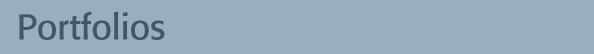
<style>
.page{position:relative;width:594px;height:54px;background:#99afbf}
.page>*{position:absolute;margin:0}
.t1{font:35.4px "Formata-Regular";color:#415868}
</style>
<div class="page">
<p class="t1" style="left:19px;top:11px;width:146px;height:29px">Portfolios</p>
</div>
